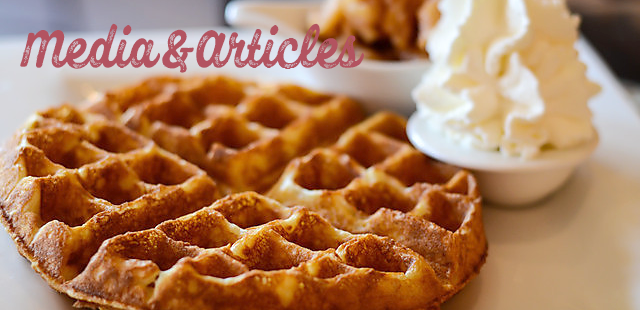
<style>
.page{position:relative;width:640px;height:310px}
.page>*{position:absolute;margin:0}
.t1{font:64.9px "FelishaRough";color:#b35360}
</style>
<div class="page">
<p class="t1" style="left:20px;top:23px;width:344px;height:50px">Media&amp;Articles</p>
</div>
